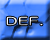
<style>
.page{position:relative;width:50px;height:40px}
.page>*{position:absolute;margin:0}
.t1{font:11.2px "Gulim";scale:1.53 1}
</style>
<div class="page">
<p class="t1" style="left:6px;top:16px;width:37px;height:10px">DEF.</p>
</div>
